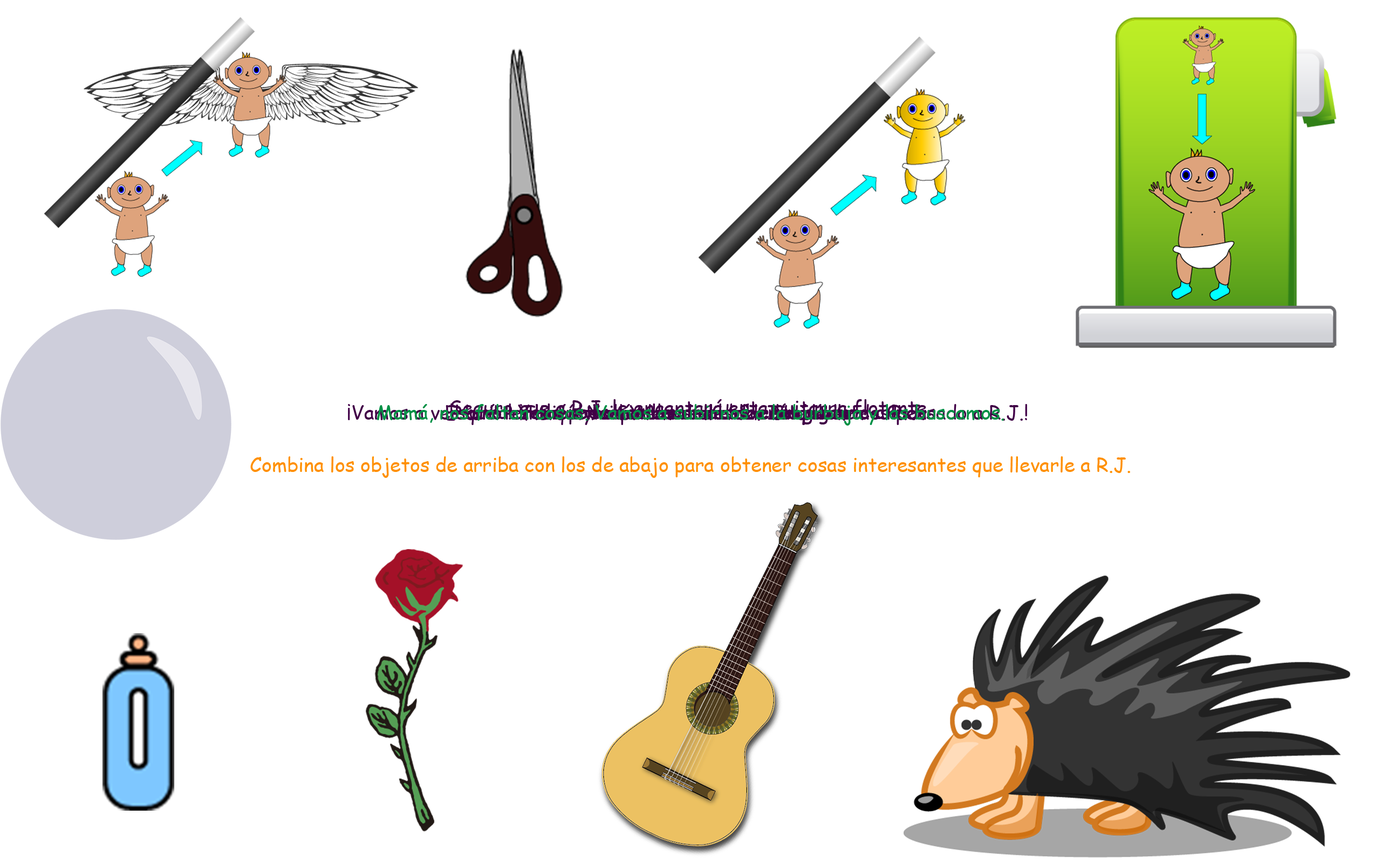
<style>
.page{position:relative;width:1381px;height:863px;background:#ffffff}
.page>*{position:absolute;margin:0}
.t1{font:19.4px "ComicSansMS";color:#410047}
.t2{font:19.4px "ComicSansMS";color:#009045}
.t3{font:19.4px "ComicSansMS"}
.t4{font:19.4px "ComicSansMS";color:#ff9000}
</style>
<div class="page">
<p class="t1" style="left:450px;top:399px;width:481px;height:21px">Seguro que a R.J. le encantará esta guitarra flotante.</p>
<p class="t1" style="left:348px;top:404px;width:679px;height:21px">¡Vamos a ver qué tenemos y si podemos llevarle lo que hemos pensado a R.J.!</p>
<p class="t2" style="left:377px;top:404px;width:627px;height:22px">Mamá, nos faltan cosas. Vamos a subirnos a la burbuja y las buscamos.</p>
<p class="t3" style="left:446px;top:404px;width:490px;height:21px">Eso no es lo que habíamos decidido. Inténtalo de nuevo</p>
<p class="t1" style="left:451px;top:404px;width:474px;height:21px">¡Hurra! Ya le podemos llevar el biberón gigante a R.J.</p>
<p class="t3" style="left:520px;top:404px;width:341px;height:17px">¡Fantástico! Ya tenemos la rosa de oro</p>
<p class="t3" style="left:536px;top:404px;width:309px;height:21px">¡Bién! Ya tenemos el erizo sin púas.</p>
<p class="t4" style="left:250px;top:456px;width:880px;height:22px">Combina los objetos de arriba con los de abajo para obtener cosas interesantes que llevarle a R.J.</p>
</div>
